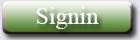
<style>
.page{position:relative;width:140px;height:40px}
.page>*{position:absolute;margin:0}
.t1{font:24px "TimesNewRomanPSMT";color:#ffffff}
</style>
<div class="page">
<p class="t1" style="left:36px;top:7px;width:63px;height:22px">Signin</p>
</div>
